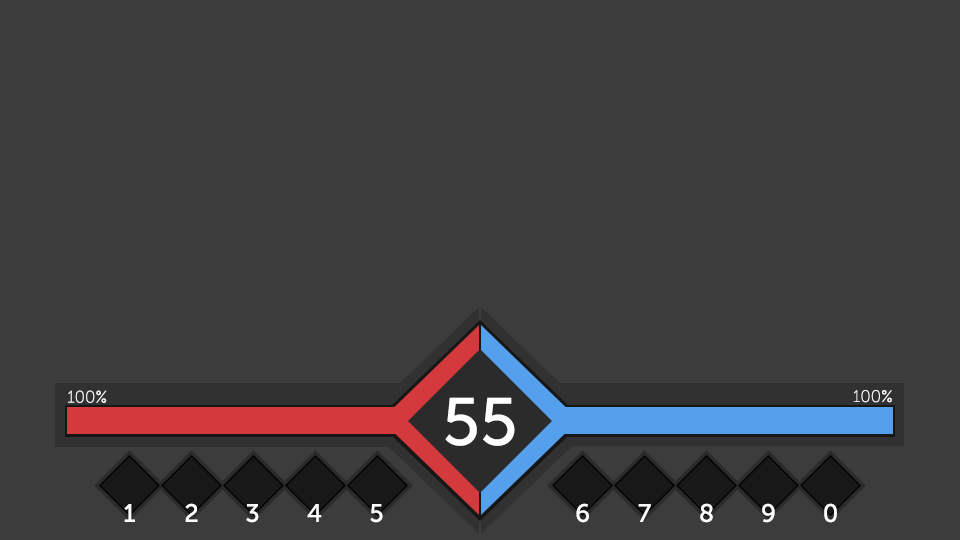
<style>
.page{position:relative;width:960px;height:540px;background:#3c3c3c}
.page>*{position:absolute;margin:0}
.t1{font:16.7px "MuseoSans-100";color:#ffffff}
.t2{font:66.7px "MuseoSans-500";color:#ffffff}
.t3{font:25px "MuseoSans-500";color:#ffffff}
</style>
<div class="page">
<p class="t1" style="left:68px;top:390px;width:39px;height:13px">100%</p>
<p class="t1" style="left:853px;top:390px;width:39px;height:13px">100%</p>
<p class="t2" style="left:445px;top:397px;width:70px;height:49px">55</p>
<p class="t3" style="left:124px;top:504px;width:11px;height:18px">1</p>
<p class="t3" style="left:185px;top:503px;width:13px;height:19px">2</p>
<p class="t3" style="left:246px;top:504px;width:13px;height:19px">3</p>
<p class="t3" style="left:307px;top:504px;width:15px;height:18px">4</p>
<p class="t3" style="left:370px;top:504px;width:13px;height:19px">5</p>
<p class="t3" style="left:576px;top:503px;width:13px;height:20px">6</p>
<p class="t3" style="left:638px;top:504px;width:13px;height:18px">7</p>
<p class="t3" style="left:700px;top:503px;width:13px;height:20px">8</p>
<p class="t3" style="left:762px;top:503px;width:13px;height:20px">9</p>
<p class="t3" style="left:824px;top:503px;width:13px;height:20px">0</p>
</div>
